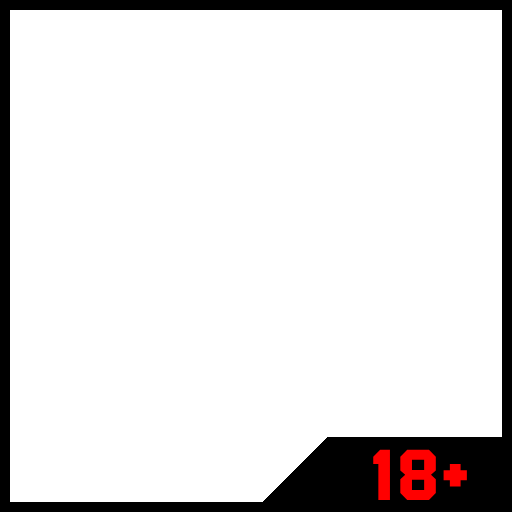
<style>
.page{position:relative;width:512px;height:512px;background:#ffffff}
.page>*{position:absolute;margin:0}
.t1{font:72px "Versa-Versa";color:#ff0000}
</style>
<div class="page">
<p class="t1" style="left:373px;top:449px;width:94px;height:51px">18+</p>
</div>
